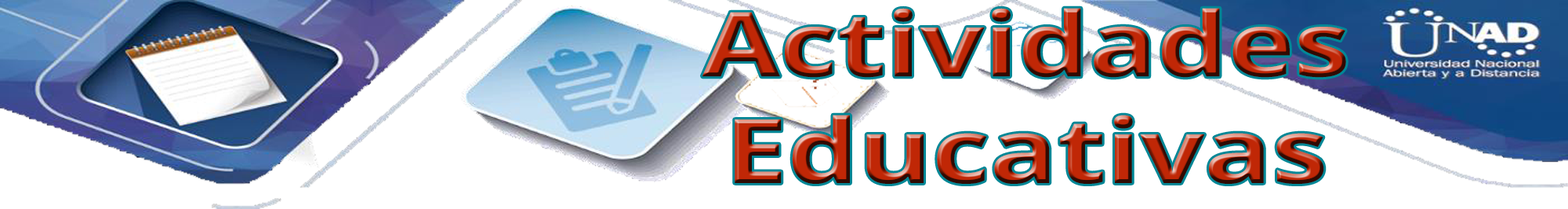
<style>
.page{position:relative;width:1568px;height:209px;background:#ffffff}
.page>*{position:absolute;margin:0}
.t1{font:88.7px "OpenSans-Bold";scale:1.26 1}
</style>
<div class="page">
<p class="t1" style="left:702px;top:8px;width:644px;height:175px;text-align:center">Actividades<br>Educativas</p>
</div>
